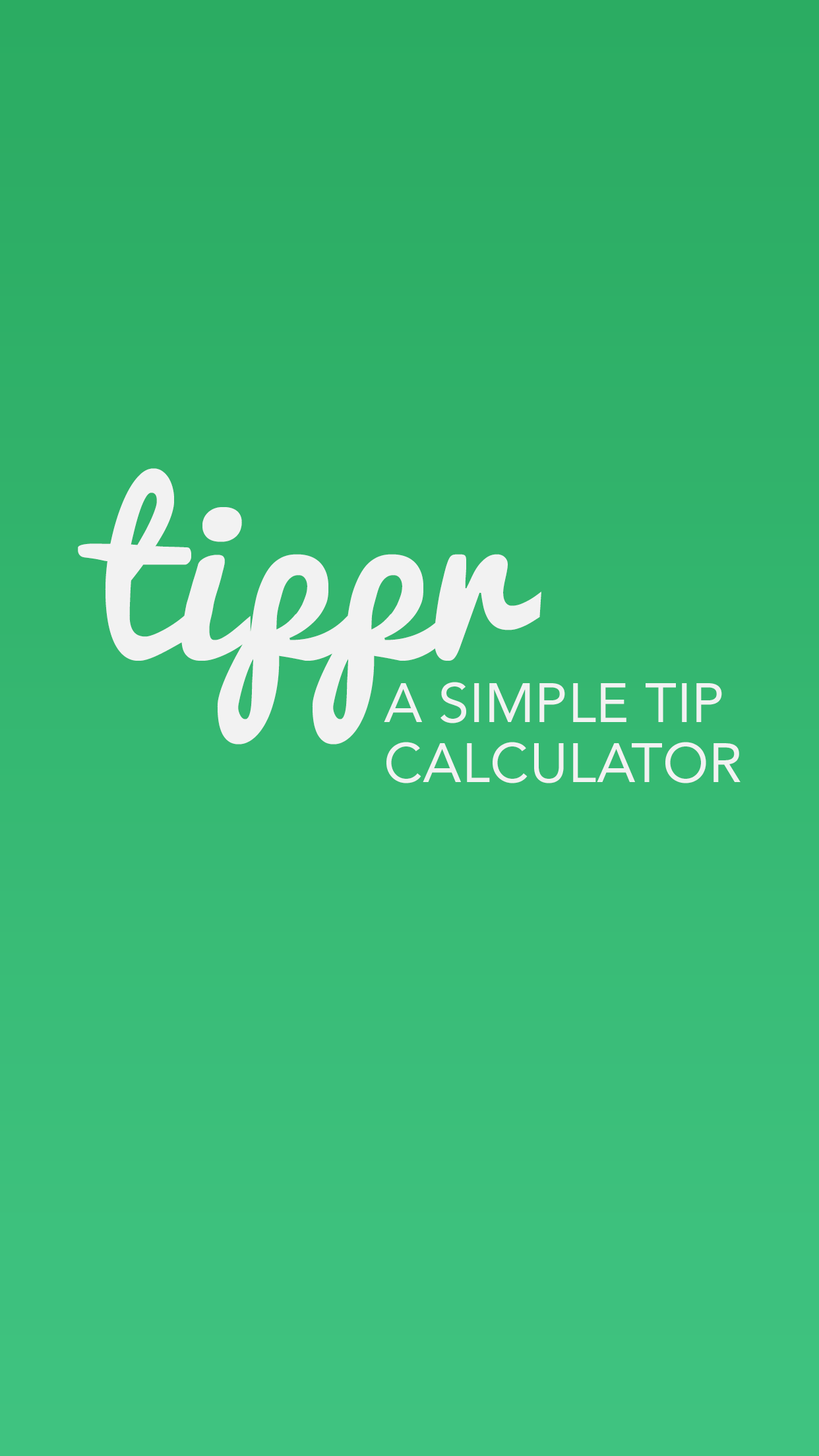
<style>
.page{position:relative;width:819px;height:1456px}
.page>*{position:absolute;margin:0}
.t1{font:219.8px "Pacifico";letter-spacing:0.01em;color:#f2f2f2}
.t2{font:55px/60.4px "Avenir-Roman";letter-spacing:0.01em;color:#f2f2f2}
</style>
<div class="page">
<p class="t1" style="left:78px;top:468px;width:463px;height:276px">tippr</p>
<p class="t2" style="left:384px;top:682px;width:357px;height:101px">A SIMPLE TIP <br>CALCULATOR</p>
</div>
